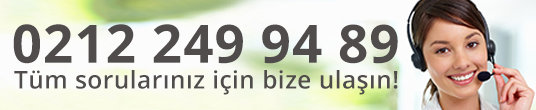
<style>
.page{position:relative;width:536px;height:110px}
.page>*{position:absolute;margin:0}
.t1{font:53px "OpenSans-Bold";letter-spacing:0.02em;color:#504c4b}
.t2{font:24.4px "OpenSans-Semibold";letter-spacing:0.02em;color:#504c4b}
</style>
<div class="page">
<p class="t1" style="left:13px;top:24px;width:385px;height:40px">0212 249 94 89</p>
<p class="t2" style="left:14px;top:70px;width:384px;height:25px">Tüm sorularınız için bize ulaşın!</p>
</div>
